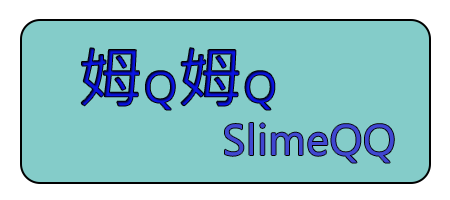
<style>
.page{position:relative;width:450px;height:200px;background:#84ccc9}
.page>*{position:absolute;margin:0}
.t1{font:65px "MicrosoftJhengHeiRegular";letter-spacing:0.02em}
.t2{font:40px "MicrosoftJhengHeiRegular";letter-spacing:0.02em}
.t3{font:40px "MicrosoftJhengHeiRegular";letter-spacing:0.02em;color:#4047d1}
</style>
<div class="page">
<p class="t1" style="left:81px;top:48px;width:194px;height:62px">姆<span class="t2">Q</span>姆<span class="t2">Q</span></p>
<p class="t3" style="left:225px;top:123px;width:169px;height:40px">SlimeQQ</p>
</div>
